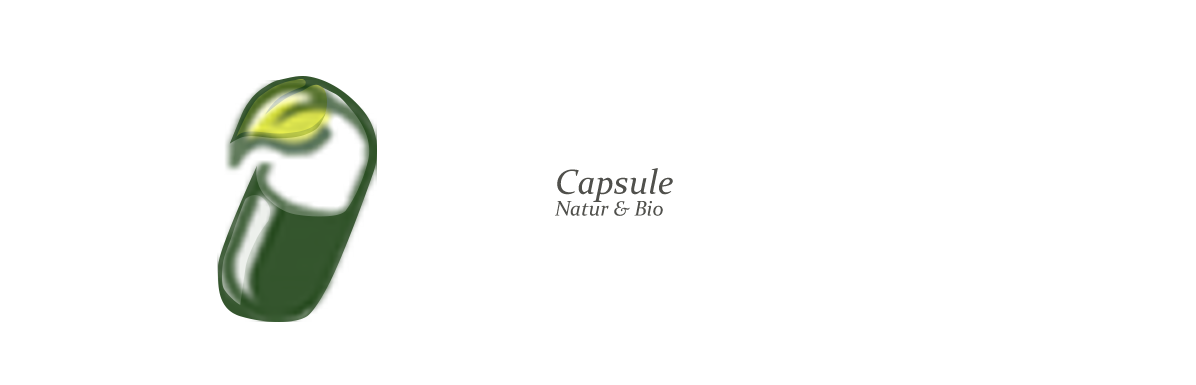
<style>
.page{position:relative;width:1196px;height:385px;background:#ffffff}
.page>*{position:absolute;margin:0}
.t1{font:35.1px "Constantia-Italic";color:#50504c}
.t2{font:21.2px "Constantia-Italic";color:#50504c}
</style>
<div class="page">
<p class="t1" style="left:557px;top:168px;width:116px;height:34px">Capsule</p>
<p class="t2" style="left:555px;top:201px;width:108px;height:15px">Natur &amp; Bio</p>
</div>
